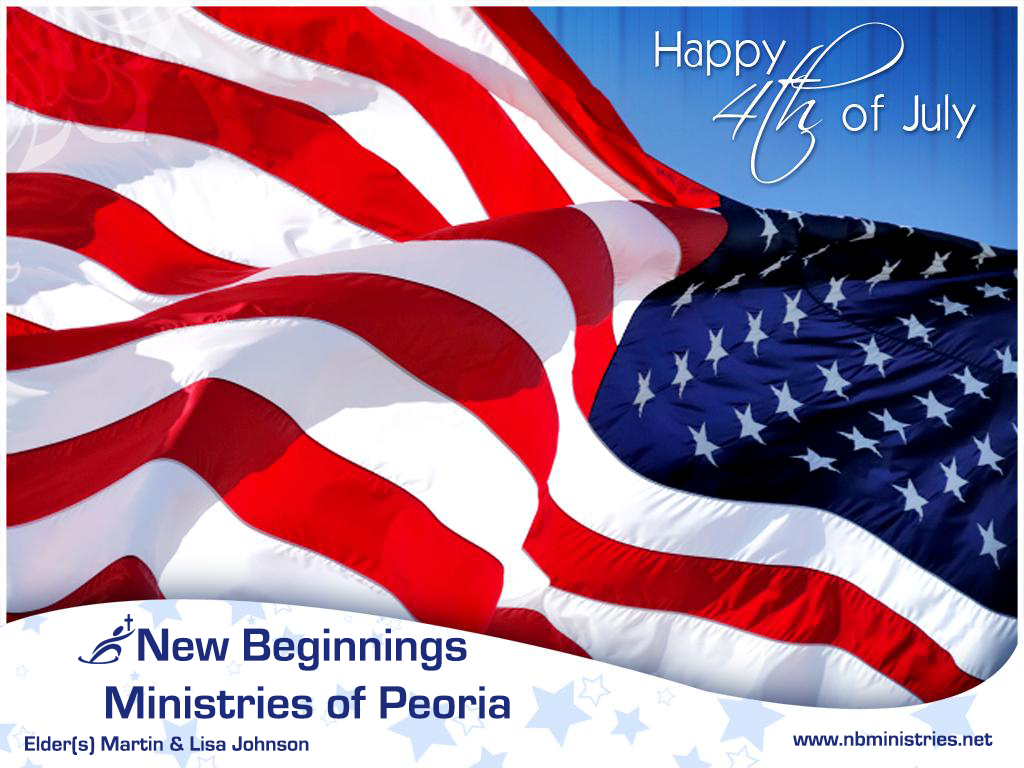
<style>
.page{position:relative;width:1024px;height:768px}
.page>*{position:absolute;margin:0}
.t1{font:48px "EurostileBold";color:#1c2c7a}
.t2{font:21.3px "EurostileBold";color:#1c2c7a}
</style>
<div class="page">
<p class="t1" style="left:106px;top:628px;width:404px;height:91px;text-align:center">New Beginnings<br> Ministries of Peoria</p>
<p class="t2" style="left:25px;top:736px;width:284px;height:19px">Elder(s) Martin &amp; Lisa Johnson</p>
<p class="t2" style="left:793px;top:731px;width:200px;height:15px">www.nbministries.net</p>
</div>
